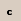
<style>
.page{position:relative;width:21px;height:21px;background:#d9cdc1}
.page>*{position:absolute;margin:0}
.t1{font:9px "Tahoma-Bold";color:#000000}
</style>
<div class="page">
<p class="t1" style="left:7px;top:10px;width:5px;height:5px">c</p>
</div>
